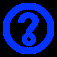
<style>
.page{position:relative;width:57px;height:57px;background:#000000}
.page>*{position:absolute;margin:0}
.t1{font:45px "DigitalDisk-Regular";color:#0433ff}
</style>
<div class="page">
<p class="t1" style="left:18px;top:12px;width:21px;height:34px">?</p>
</div>
